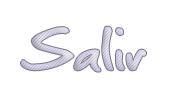
<style>
.page{position:relative;width:170px;height:108px;background:#ffffff}
.page>*{position:absolute;margin:0}
.t1{font:80px "Christopherhand";font-weight:bold;scale:1.1 1}
</style>
<div class="page">
<p class="t1" style="left:21px;top:26px;width:125px;height:46px">Salir</p>
</div>
